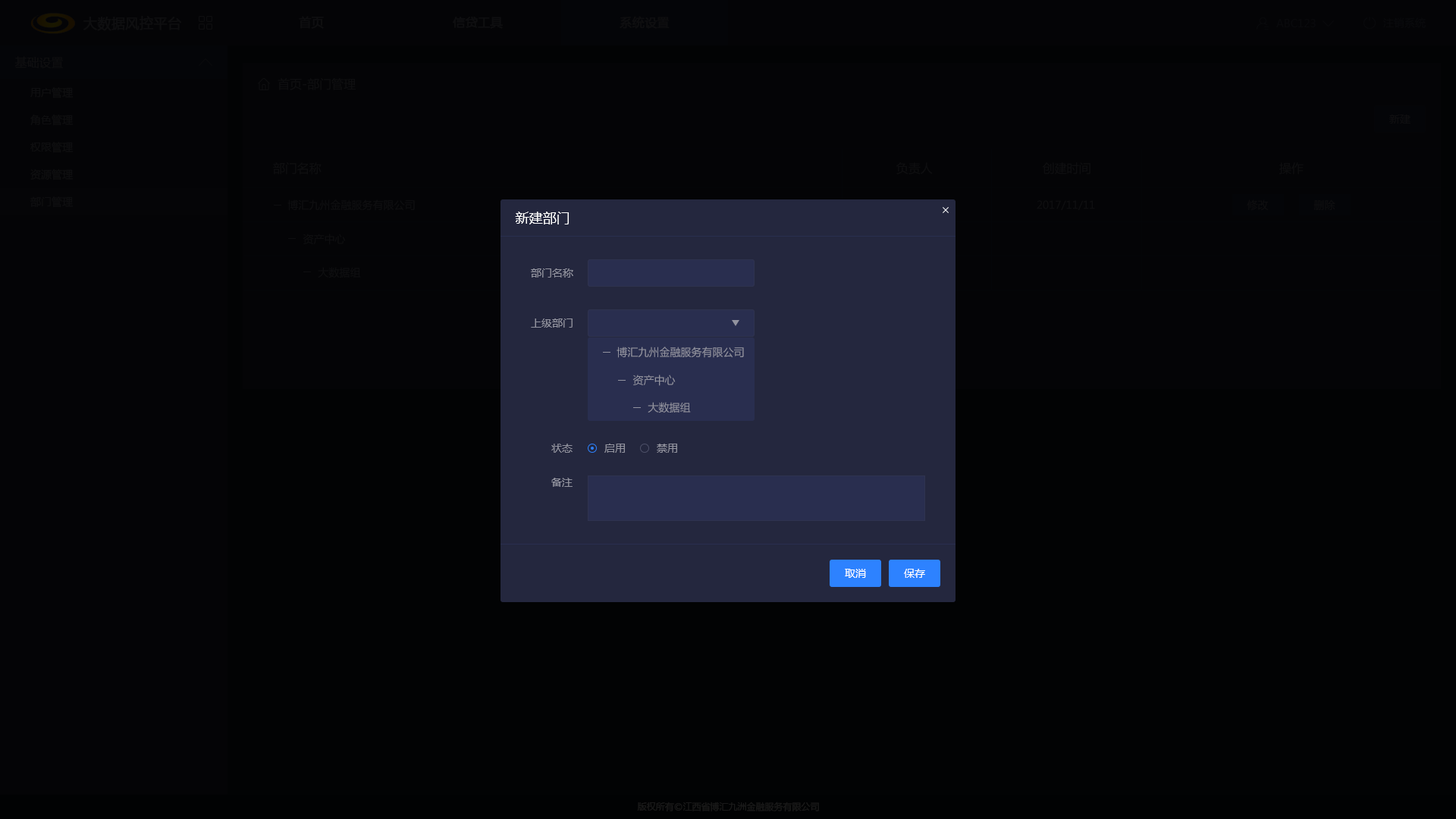
<style>
.page{position:relative;width:1456px;height:819px;background:#040406}
.page>*{position:absolute;margin:0}
.t1{font:13.6px "MicrosoftYaHei";color:#0e0e10;font-weight:bold}
.t2{font:12.1px "MicrosoftYaHei";color:#0e0e10;font-weight:bold}
.t3{font:10.6px "MicrosoftYaHei";color:#09090c}
.t4{font:12.1px "MicrosoftYaHei";color:#0e0e10}
.t5{font:10.6px "MicrosoftYaHei";color:#0e0e10}
.t6{font:13.6px "MicrosoftYaHei";color:#ffffff}
.t7{font:10.6px "MicrosoftYaHei";color:#92939f}
.t8{font:10.6px "MicrosoftYaHei";color:#ffffff}
.t9{font:9.1px "MicrosoftYaHei";color:#191919}
</style>
<div class="page">
<p class="t1" style="left:83px;top:16px;width:98px;height:15px">大数据风控平台</p>
<p class="t2" style="left:299px;top:16px;width:25px;height:13px">首页</p>
<p class="t2" style="left:453px;top:17px;width:50px;height:12px">信贷工具</p>
<p class="t2" style="left:620px;top:16px;width:50px;height:13px">系统设置</p>
<p class="t3" style="left:1383px;top:17px;width:43px;height:11px">注销系统</p>
<p class="t3" style="left:1276px;top:19px;width:40px;height:8px">ABC123</p>
<p class="t4" style="left:14px;top:56px;width:49px;height:12px">基础设置</p>
<p class="t5" style="left:30px;top:87px;width:44px;height:12px">用户管理</p>
<p class="t4" style="left:278px;top:78px;width:78px;height:12px">首页-部门管理</p>
<p class="t5" style="left:30px;top:115px;width:44px;height:11px">角色管理</p>
<p class="t5" style="left:1389px;top:115px;width:21px;height:9px">新建</p>
<p class="t5" style="left:30px;top:142px;width:44px;height:11px">权限管理</p>
<p class="t5" style="left:30px;top:169px;width:44px;height:11px">资源管理</p>
<p class="t4" style="left:273px;top:162px;width:49px;height:12px">部门名称</p>
<p class="t4" style="left:896px;top:162px;width:37px;height:12px">负责人</p>
<p class="t4" style="left:1043px;top:162px;width:47px;height:12px">创建时间</p>
<p class="t4" style="left:1279px;top:162px;width:25px;height:12px">操作</p>
<p class="t5" style="left:30px;top:196px;width:44px;height:12px">部门管理</p>
<p class="t5" style="left:287px;top:199px;width:128px;height:12px">博汇九州金融服务有限公司</p>
<p class="t5" style="left:1037px;top:200px;width:58px;height:10px">2017/11/11</p>
<p class="t5" style="left:1247px;top:199px;width:22px;height:12px">修改</p>
<p class="t5" style="left:1313px;top:199px;width:22px;height:12px">删除</p>
<p class="t6" style="left:515px;top:212px;width:54px;height:12px">新建部门</p>
<p class="t5" style="left:303px;top:234px;width:43px;height:11px">资产中心</p>
<p class="t5" style="left:318px;top:267px;width:43px;height:11px">大数据组</p>
<p class="t7" style="left:531px;top:268px;width:42px;height:10px">部门名称</p>
<p class="t7" style="left:531px;top:318px;width:42px;height:10px">上级部门</p>
<p class="t7" style="left:617px;top:347px;width:127px;height:11px">博汇九州金融服务有限公司</p>
<p class="t7" style="left:632px;top:375px;width:44px;height:11px">资产中心</p>
<p class="t7" style="left:648px;top:402px;width:43px;height:11px">大数据组</p>
<p class="t7" style="left:551px;top:444px;width:22px;height:9px">状态</p>
<p class="t7" style="left:604px;top:444px;width:21px;height:9px">启用</p>
<p class="t7" style="left:657px;top:444px;width:20px;height:9px">禁用</p>
<p class="t7" style="left:551px;top:478px;width:22px;height:9px">备注</p>
<p class="t8" style="left:845px;top:569px;width:21px;height:9px">取消</p>
<p class="t8" style="left:904px;top:569px;width:21px;height:9px">保存</p>
<p class="t9" style="left:637px;top:802px;width:182px;height:9px">版权所有©江西省博汇九洲金融服务有限公司</p>
</div>
